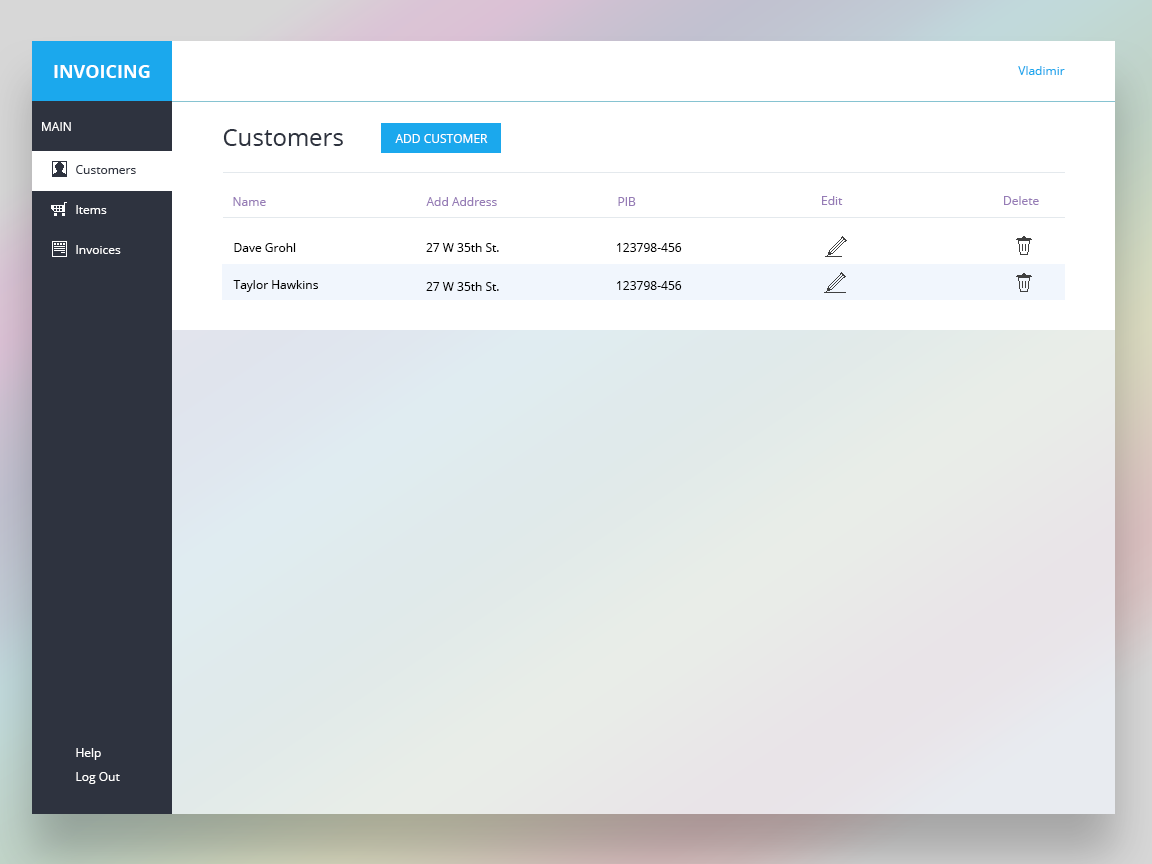
<style>
.page{position:relative;width:1152px;height:864px;background:#ffffff}
.page>*{position:absolute;margin:0}
.t1{font:18px "OpenSans-Bold";color:#ffffff}
.t2{font:12px "OpenSans";color:#1ba8ed}
.t3{font:12px "OpenSans";color:#ffffff}
.t4{font:24px "OpenSans";color:#2e333f}
.t5{font:12px "OpenSans";color:#2e333f}
.t6{font:12px "OpenSans";color:#967cb6}
.t7{font:12px "OpenSans";color:#000000}
</style>
<div class="page">
<p class="t1" style="left:54px;top:65px;width:96px;height:13px">INVOICING</p>
<p class="t2" style="left:1018px;top:66px;width:47px;height:9px">Vladimir</p>
<p class="t3" style="left:42px;top:122px;width:29px;height:9px">MAIN</p>
<p class="t4" style="left:223px;top:129px;width:120px;height:17px">Customers</p>
<p class="t3" style="left:395px;top:134px;width:93px;height:9px">ADD CUSTOMER</p>
<p class="t5" style="left:76px;top:165px;width:60px;height:9px">Customers</p>
<p class="t6" style="left:233px;top:197px;width:33px;height:9px">Name</p>
<p class="t6" style="left:426px;top:197px;width:71px;height:9px">Add Address</p>
<p class="t6" style="left:618px;top:197px;width:18px;height:9px">PIB</p>
<p class="t6" style="left:822px;top:196px;width:21px;height:9px">Edit</p>
<p class="t6" style="left:1004px;top:196px;width:35px;height:9px">Delete</p>
<p class="t3" style="left:76px;top:205px;width:31px;height:9px">Items</p>
<p class="t3" style="left:76px;top:245px;width:45px;height:9px">Invoices</p>
<p class="t7" style="left:234px;top:243px;width:62px;height:9px">Dave Grohl</p>
<p class="t7" style="left:426px;top:243px;width:73px;height:9px">27 W 35th St.</p>
<p class="t7" style="left:617px;top:243px;width:65px;height:9px">123798-456</p>
<p class="t7" style="left:233px;top:280px;width:85px;height:12px">Taylor Hawkins</p>
<p class="t7" style="left:617px;top:281px;width:65px;height:9px">123798-456</p>
<p class="t7" style="left:426px;top:282px;width:73px;height:9px">27 W 35th St.</p>
<p class="t3" style="left:76px;top:748px;width:25px;height:12px">Help</p>
<p class="t3" style="left:76px;top:772px;width:44px;height:12px">Log Out</p>
</div>
